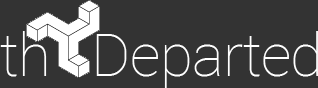
<style>
.page{position:relative;width:318px;height:88px;background:#333333}
.page>*{position:absolute;margin:0}
.t1{font:60px "Roboto-Thin";letter-spacing:-0.01em;color:#ffffff}
</style>
<div class="page">
<p class="t1" style="left:0px;top:31px;width:318px;height:57px">th   Departed</p>
</div>
